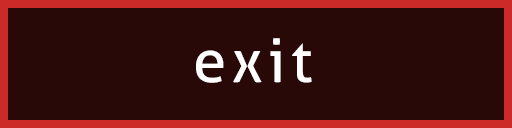
<style>
.page{position:relative;width:512px;height:128px;background:#290808}
.page>*{position:absolute;margin:0}
.t1{font:60px "Aller-Regular";letter-spacing:0.1em;color:#ffffff}
</style>
<div class="page">
<p class="t1" style="left:196px;top:38px;width:116px;height:45px">exit</p>
</div>
